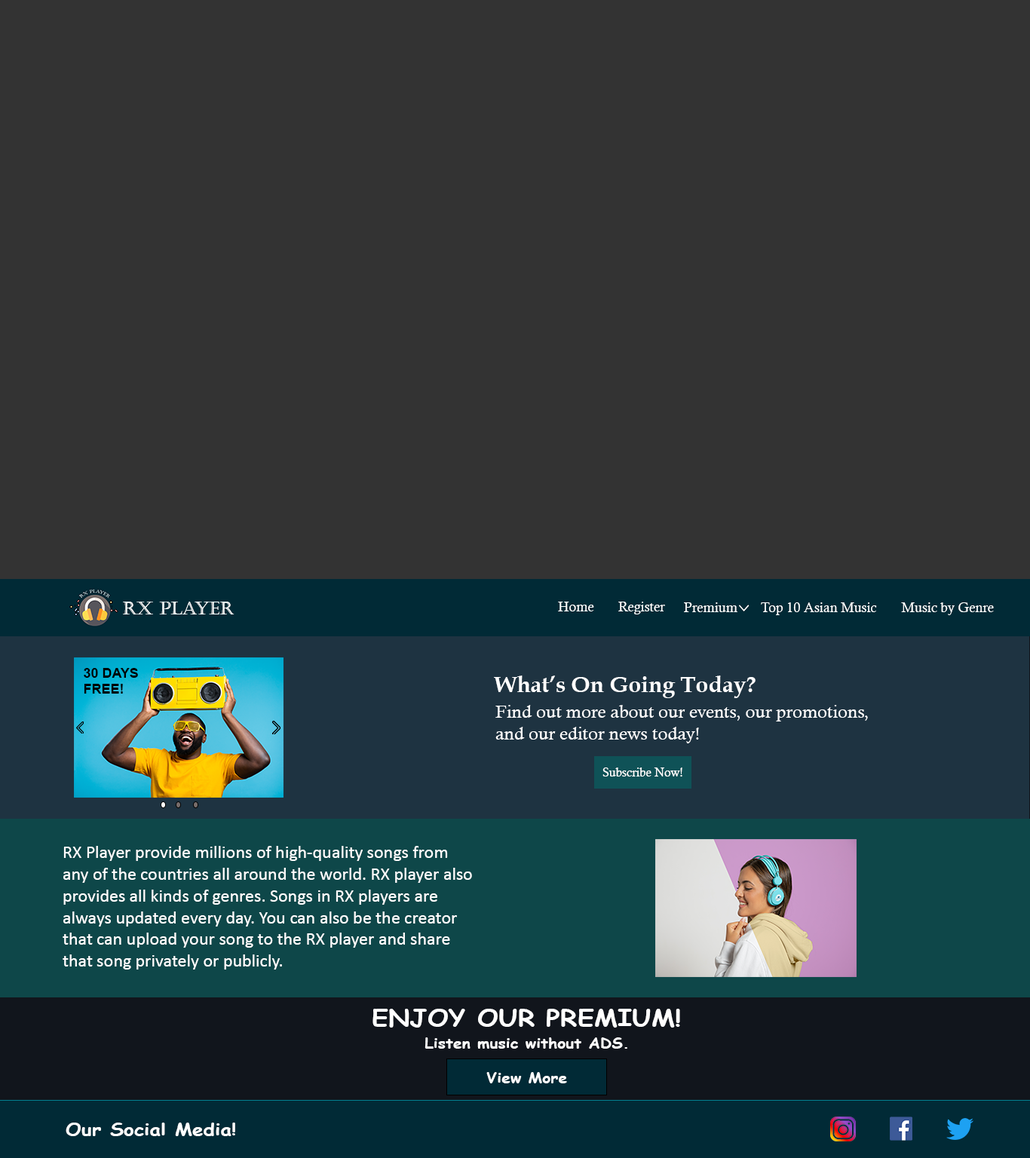
<style>
.page{position:relative;width:1030px;height:1158px;background:#333333}
.page>*{position:absolute;margin:0}
.t1{font:18.1px "Castellar";color:#ffffff}
.t2{font:13.6px "CalistoMT";color:#ffffff}
.t3{font:13.6px "Arial-BoldMT";color:#000000}
.t4{font:22.6px "BookAntiqua-Bold";color:#ffffff}
.t5{font:18.1px "CalistoMT";color:#ffffff}
.t6{font:12.1px "CalistoMT";color:#ffffff}
.t7{font:18.1px "Calibri";color:#ffffff}
.t8{font:22.6px "ComicSansMS-Bold";color:#ffffff;scale:1.17 1}
.t9{font:13.6px "ComicSansMS-Bold";color:#ffffff;scale:1.17 1}
.t10{font:16.9px "ComicSansMS-Bold";color:#ffffff;scale:1.17 1}
</style>
<div class="page">
<p class="t1" style="left:122px;top:602px;width:112px;height:12px">rx player</p>
<p class="t2" style="left:558px;top:602px;width:36px;height:9px">Home</p>
<p class="t2" style="left:618px;top:602px;width:47px;height:12px">Register</p>
<p class="t2" style="left:684px;top:602px;width:53px;height:10px">Premium</p>
<p class="t2" style="left:761px;top:602px;width:116px;height:13px">Top 10 Asian Music</p>
<p class="t2" style="left:901px;top:602px;width:93px;height:13px">Music by Genre</p>
<p class="t3" style="left:84px;top:668px;width:54px;height:26px">30 DAYS<br>FREE!</p>
<p class="t4" style="left:494px;top:675px;width:261px;height:23px">What’s On Going Today?</p>
<p class="t5" style="left:495px;top:705px;width:373px;height:38px">Find out more about our events, our promotions,<br>and our editor news today!</p>
<p class="t6" style="left:602px;top:767px;width:80px;height:9px">Subscribe Now!</p>
<p class="t7" style="left:63px;top:846px;width:409px;height:123px">RX Player provide millions of high-quality songs from any of the countries all around the world. RX player also provides all kinds of genres. Songs in RX players are always updated every day. You can also be the creator that can upload your song to the RX player and share that song privately or publicly.</p>
<p class="t8" style="left:372px;top:1009px;width:308px;height:19px">ENJOY OUR PREMIUM!</p>
<p class="t9" style="left:424px;top:1037px;width:203px;height:12px">Listen music without ADS.</p>
<p class="t9" style="left:486px;top:1072px;width:81px;height:11px">View More</p>
<p class="t10" style="left:66px;top:1123px;width:169px;height:13px">Our Social Media!</p>
</div>
